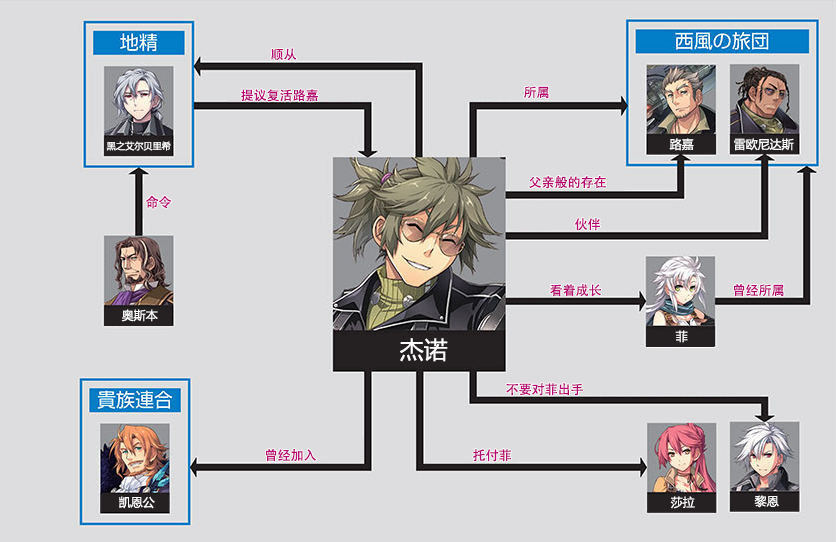
<style>
.page{position:relative;width:836px;height:542px;background:#dddddf}
.page>*{position:absolute;margin:0}
.t1{font:13px "AdobeHeitiStd-Regular";color:#b70773}
.t2{font:9.2px "MicrosoftYaHei";color:#ffffff}
.t3{font:12px "MicrosoftYaHei";color:#ffffff}
.t4{font:24px "MicrosoftYaHei";color:#ffffff}
</style>
<div class="page">
<p class="t1" style="left:271px;top:48px;width:26px;height:13px">顺从</p>
<p class="t1" style="left:241px;top:89px;width:77px;height:13px">提议复活路嘉</p>
<p class="t1" style="left:524px;top:86px;width:25px;height:13px">所属</p>
<p class="t2" style="left:106px;top:141px;width:65px;height:10px">黑之艾尔贝里希</p>
<p class="t3" style="left:669px;top:138px;width:25px;height:13px">路嘉</p>
<p class="t3" style="left:734px;top:138px;width:60px;height:13px">雷欧尼达斯</p>
<p class="t1" style="left:529px;top:176px;width:77px;height:13px">父亲般的存在</p>
<p class="t1" style="left:145px;top:195px;width:27px;height:14px">命令</p>
<p class="t1" style="left:575px;top:218px;width:25px;height:13px">伙伴</p>
<p class="t1" style="left:550px;top:284px;width:51px;height:13px">看着成长</p>
<p class="t1" style="left:734px;top:284px;width:50px;height:13px">曾经所属</p>
<p class="t3" style="left:121px;top:309px;width:37px;height:13px">奥斯本</p>
<p class="t4" style="left:400px;top:338px;width:48px;height:24px">杰诺</p>
<p class="t3" style="left:675px;top:330px;width:13px;height:13px">菲</p>
<p class="t1" style="left:506px;top:383px;width:77px;height:13px">不要对菲出手</p>
<p class="t1" style="left:266px;top:449px;width:50px;height:13px">曾经加入</p>
<p class="t1" style="left:473px;top:449px;width:38px;height:13px">托付菲</p>
<p class="t3" style="left:119px;top:496px;width:36px;height:13px">凯恩公</p>
<p class="t3" style="left:670px;top:496px;width:25px;height:13px">莎拉</p>
<p class="t3" style="left:754px;top:495px;width:25px;height:13px">黎恩</p>
</div>
